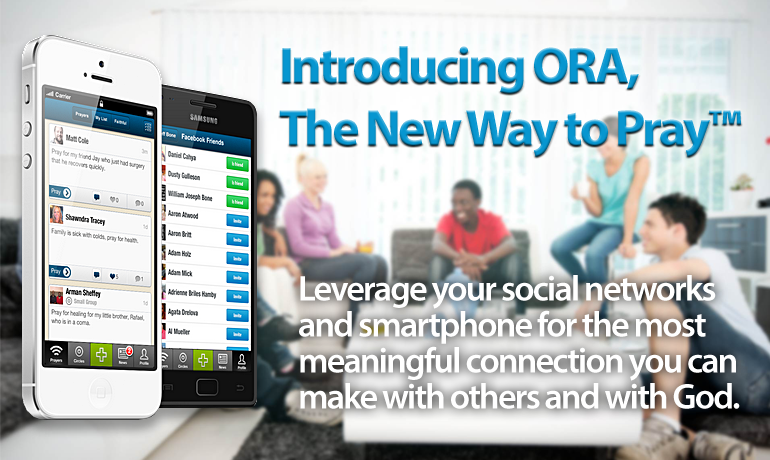
<style>
.page{position:relative;width:770px;height:460px}
.page>*{position:absolute;margin:0}
.t1{font:52px "MyriadPro-Bold";letter-spacing:-0.05em;color:#0796d0}
.t2{font:36px/36px "MyriadPro-Semibold";letter-spacing:-0.05em;color:#ffffff}
</style>
<div class="page">
<p class="t1" style="left:279px;top:46px;width:462px;height:111px">Introducing ORA,<br>The New Way to Pray™</p>
<p class="t2" style="left:299px;top:275px;width:441px;height:134px">Leverage your social networks and smartphone for the most<br>meaningful connection you can make with others and with God.</p>
</div>
